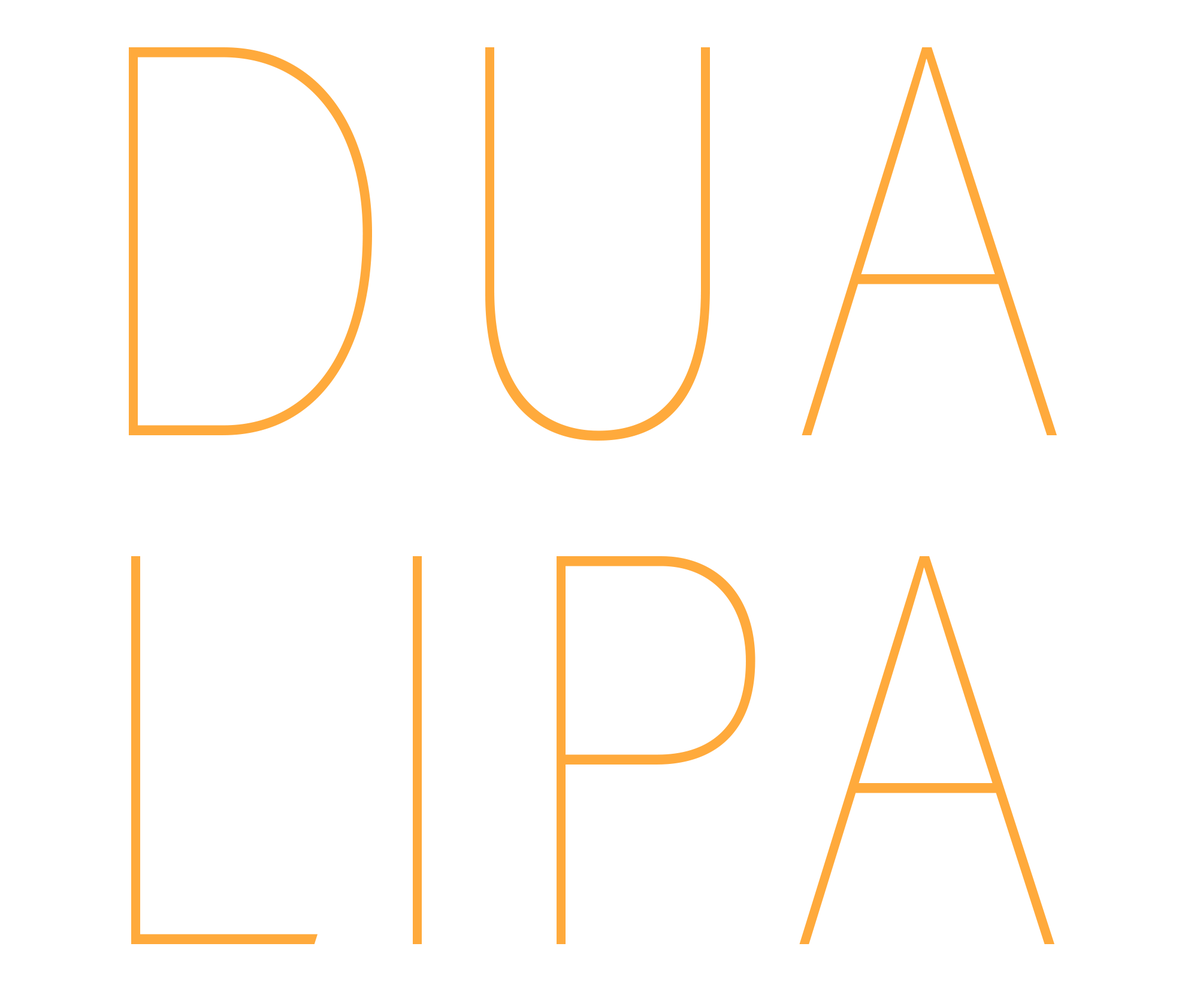
<style>
.page{position:relative;width:1191px;height:1001px;background:#ffffff}
.page>*{position:absolute;margin:0}
.t1{font:551.5px "AcuminPro-Thin";letter-spacing:0.1em;color:#ffaa3c;scale:0.81 1}
</style>
<div class="page">
<p class="t1" style="left:129px;top:47px;width:928px;height:898px;text-align:center">DUA <br>LIPA</p>
</div>
